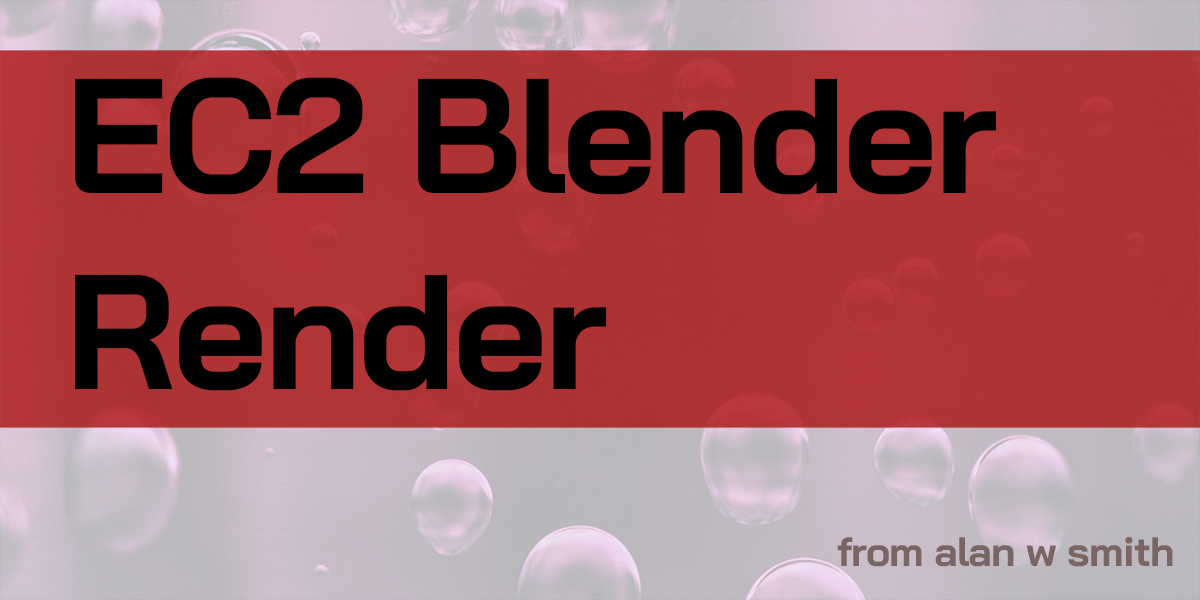
<style>
.page{position:relative;width:1200px;height:600px}
.page>*{position:absolute;margin:0}
.t1{font:163px "BaiJamjuree-Bold";letter-spacing:-0.02em;color:#000000}
.t2{font:40.9px "BaiJamjuree-Bold";letter-spacing:-0.02em;color:#7a6565}
</style>
<div class="page">
<p class="t1" style="left:75px;top:77px;width:922px;height:314px">EC2 Blender <br>Render</p>
<p class="t2" style="left:837px;top:537px;width:336px;height:30px">from alan w smith</p>
</div>
